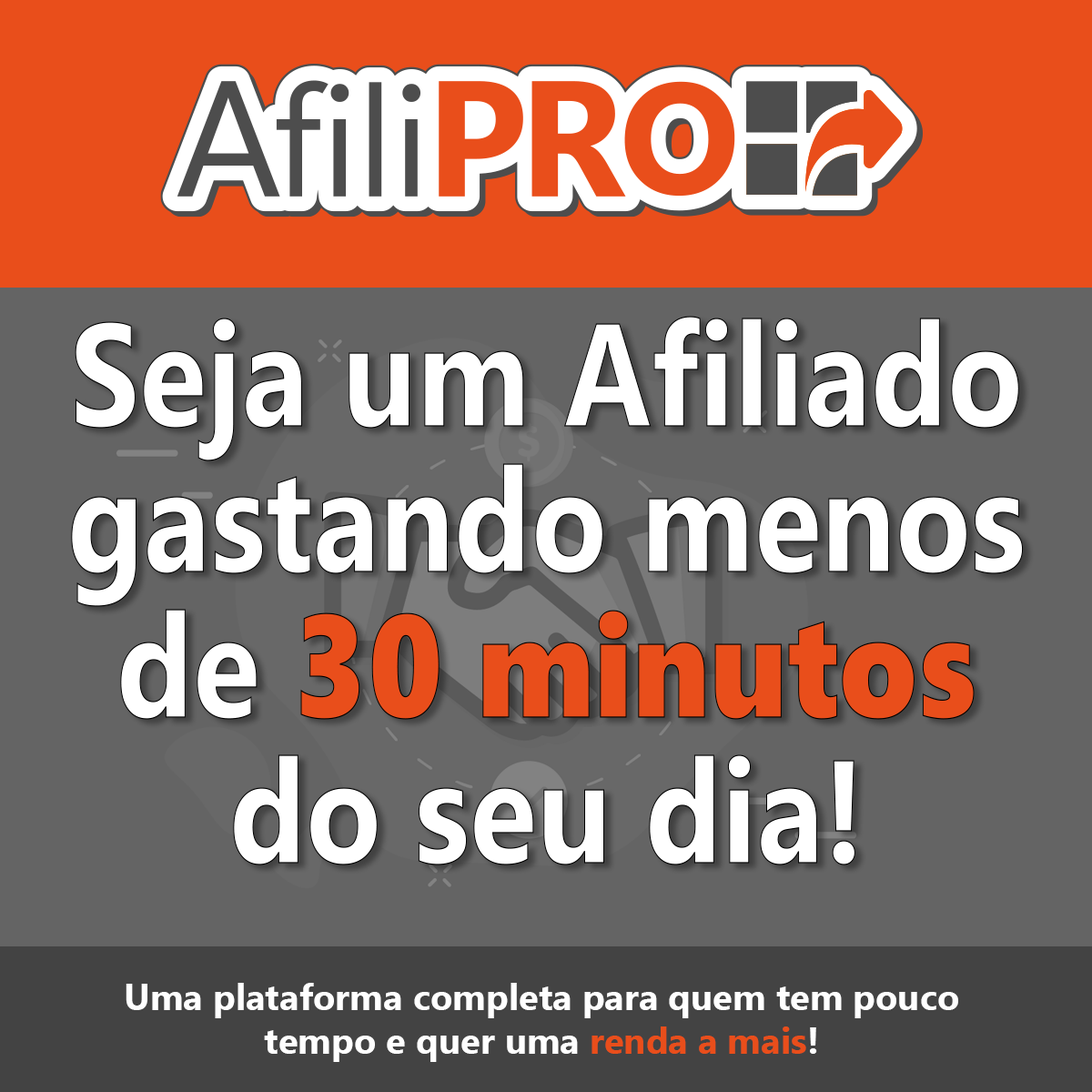
<style>
.page{position:relative;width:1092px;height:1092px;background:#646464}
.page>*{position:absolute;margin:0}
.t1{font:145.6px/145.6px "SegoeUI-Bold";color:#ffffff;scale:0.85 1}
.t2{font:145.6px/145.6px "SegoeUIBlack";color:#e94e1b;scale:0.85 1}
.t3{font:36.4px "SegoeUI-Bold";color:#ffffff}
.t4{font:36.4px "SegoeUI-Bold";color:#e94e1b}
</style>
<div class="page">
<p class="t1" style="left:71px;top:316px;width:953px;height:549px;text-align:center">Seja um Afiliado<br>gastando menos<br>de <span class="t2">30 minutos<br></span>do seu dia!</p>
<p class="t3" style="left:126px;top:983px;width:832px;height:79px;text-align:center">Uma plataforma completa para quem tem pouco<br>tempo e quer uma <span class="t4">renda a mais</span>!</p>
</div>
